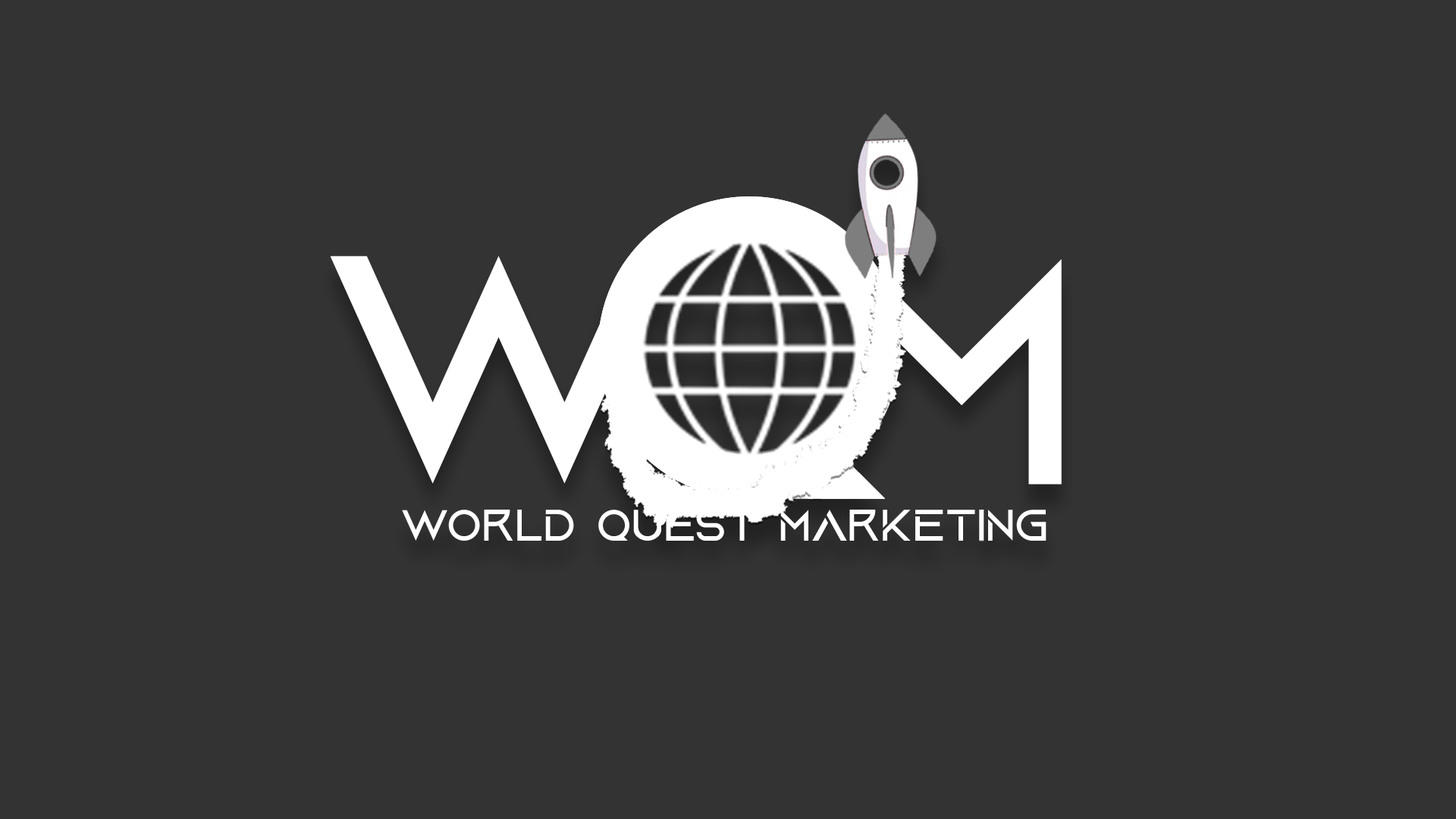
<style>
.page{position:relative;width:1456px;height:819px;background:#333333}
.page>*{position:absolute;margin:0}
.t1{font:455px "AquireRegular";color:#ffffff}
.t2{font:345.9px "AquireRegular";color:#ffffff}
.t3{font:339.1px "AquireRegular";color:#ffffff}
.t4{font:46.5px "AquireRegular";color:#ffffff}
</style>
<div class="page">
<p class="t1" style="left:598px;top:196px;width:303px;height:303px">Q</p>
<p class="t1" style="left:598px;top:196px;width:303px;height:303px">Q</p>
<p class="t2" style="left:330px;top:256px;width:337px;height:228px">W</p>
<p class="t3" style="left:860px;top:258px;width:202px;height:227px">M</p>
<p class="t4" style="left:402px;top:510px;width:644px;height:31px">World quest marketing</p>
</div>
